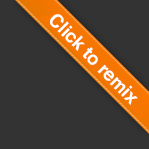
<style>
.page{position:relative;width:149px;height:149px;background:#333333}
.page>*{position:absolute;margin:0}
.t1{font:18.4px "Helvetica-Bold";letter-spacing:-0.01em;color:#ffffff}
</style>
<div class="page">
<p class="t1" style="left:50px;top:14px;width:88px;height:92px;rotate:45deg">Click to remix</p>
</div>
